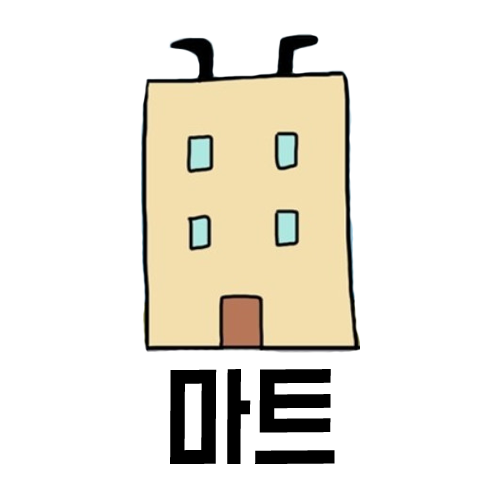
<style>
.page{position:relative;width:500px;height:500px;background:#ffffff}
.page>*{position:absolute;margin:0}
.t1{font:100.1px "BMDoHyeon";color:#000000;scale:0.92 1}
</style>
<div class="page">
<p class="t1" style="left:170px;top:369px;width:165px;height:95px">마트</p>
</div>
